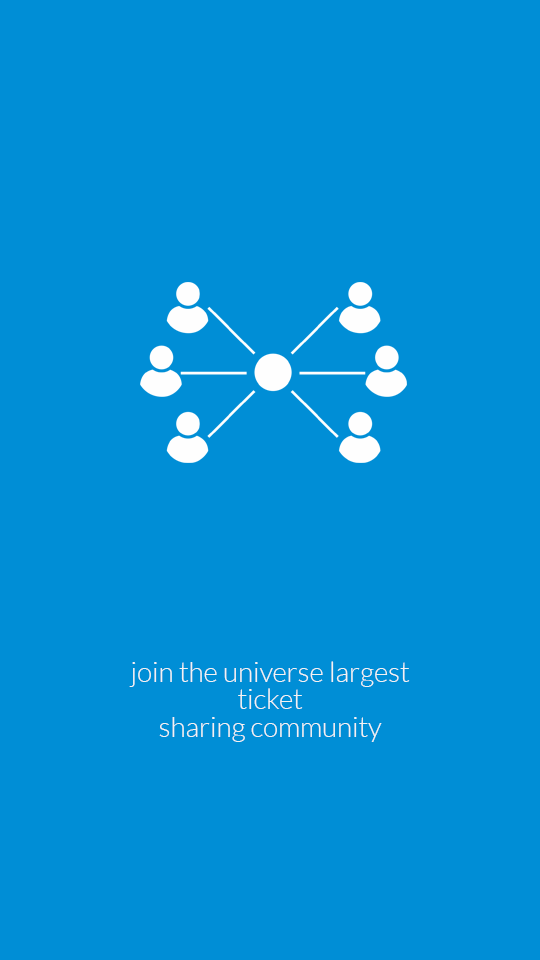
<style>
.page{position:relative;width:540px;height:960px;background:#008ed6}
.page>*{position:absolute;margin:0}
.t1{font:27.6px "Lato-Light";color:#f3f3f3}
</style>
<div class="page">
<p class="t1" style="left:129px;top:661px;width:281px;height:81px;text-align:center">join the universe largest  ticket <br>sharing community</p>
</div>
